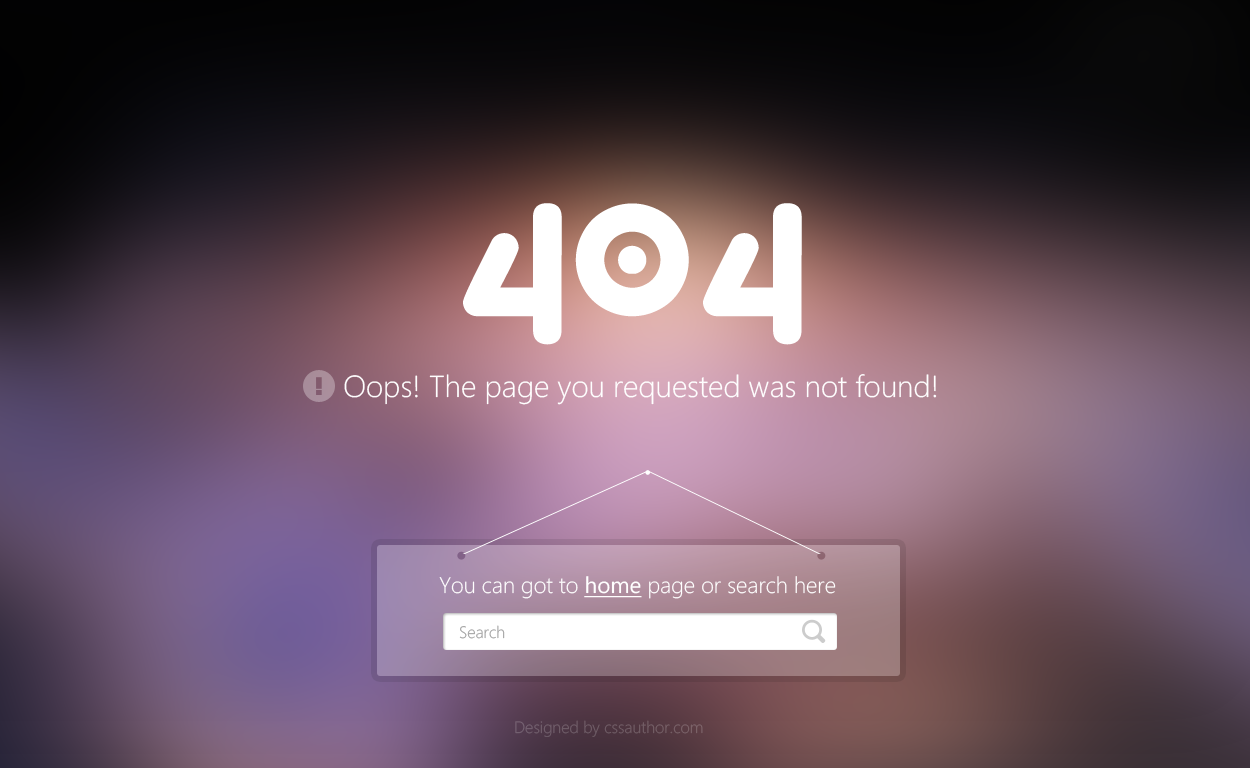
<style>
.page{position:relative;width:1250px;height:768px}
.page>*{position:absolute;margin:0}
.t1{font:144.4px "Virgo01";color:#ffffff}
.t2{font:30.4px "SegoeWP-Light";color:#ffffff}
.t3{font:22.4px "SegoeWP-Light";color:#ffffff}
.t4{font:22.4px "SegoeWPN";color:#ffffff;text-decoration:underline}
.t5{font:16.4px "SegoeWP-Light";color:#a5a5a5}
.t6{font:16.4px "SegoeWP-Light";color:#7c6469}
</style>
<div class="page">
<p class="t1" style="left:463px;top:203px;width:339px;height:142px">404</p>
<p class="t2" style="left:344px;top:374px;width:593px;height:31px">Oops! The page you requested was not found!</p>
<p class="t3" style="left:439px;top:576px;width:397px;height:23px">You can got to <span class="t4">home</span> page or search here</p>
<p class="t5" style="left:459px;top:625px;width:46px;height:14px">Search</p>
<p class="t6" style="left:515px;top:720px;width:188px;height:17px">Designed by cssauthor.com</p>
</div>
